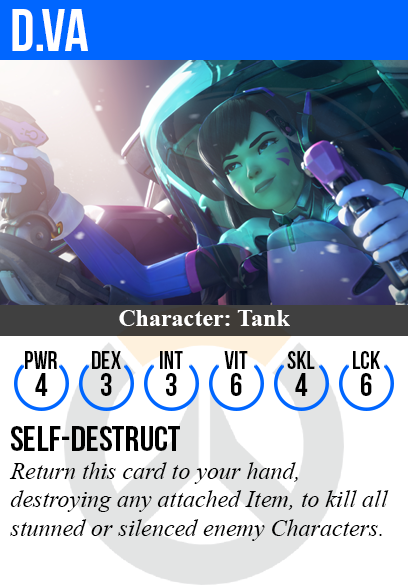
<style>
.page{position:relative;width:408px;height:585px;background:#ffffff}
.page>*{position:absolute;margin:0}
.t1{font:60px "BebasNeue";color:#ffffff}
.t2{font:24px "TimesNewRomanPS-BoldMT";color:#ffffff}
.t3{font:25px "BebasNeue";color:#000000}
.t4{font:32px "BebasNeue";color:#000000}
.t5{font:36px "BebasNeue";color:#000000}
.t6{font:24px "TimesNewRomanPS-ItalicMT";color:#000000}
</style>
<div class="page">
<p class="t1" style="left:12px;top:9px;width:76px;height:42px">d.va</p>
<p class="t2" style="left:119px;top:310px;width:171px;height:16px">Character: Tank</p>
<p class="t3" style="left:25px;top:351px;width:32px;height:18px">PWR</p>
<p class="t3" style="left:92px;top:351px;width:29px;height:18px">dex</p>
<p class="t3" style="left:160px;top:351px;width:23px;height:18px">int</p>
<p class="t3" style="left:224px;top:351px;width:24px;height:18px">vit</p>
<p class="t3" style="left:287px;top:351px;width:28px;height:18px">skl</p>
<p class="t3" style="left:353px;top:351px;width:27px;height:18px">lck</p>
<p class="t4" style="left:35px;top:373px;width:13px;height:23px">4</p>
<p class="t4" style="left:101px;top:373px;width:11px;height:23px">3</p>
<p class="t4" style="left:166px;top:373px;width:11px;height:23px">3</p>
<p class="t4" style="left:231px;top:373px;width:11px;height:23px">6</p>
<p class="t4" style="left:295px;top:373px;width:13px;height:23px">4</p>
<p class="t4" style="left:361px;top:373px;width:11px;height:23px">6</p>
<p class="t5" style="left:11px;top:426px;width:169px;height:25px">self-destruct</p>
<p class="t6" style="left:9px;top:462px;width:380px;height:79px">Return this card to your hand,<br>destroying any attached Item, to kill all<br>stunned or silenced enemy Characters.</p>
</div>
